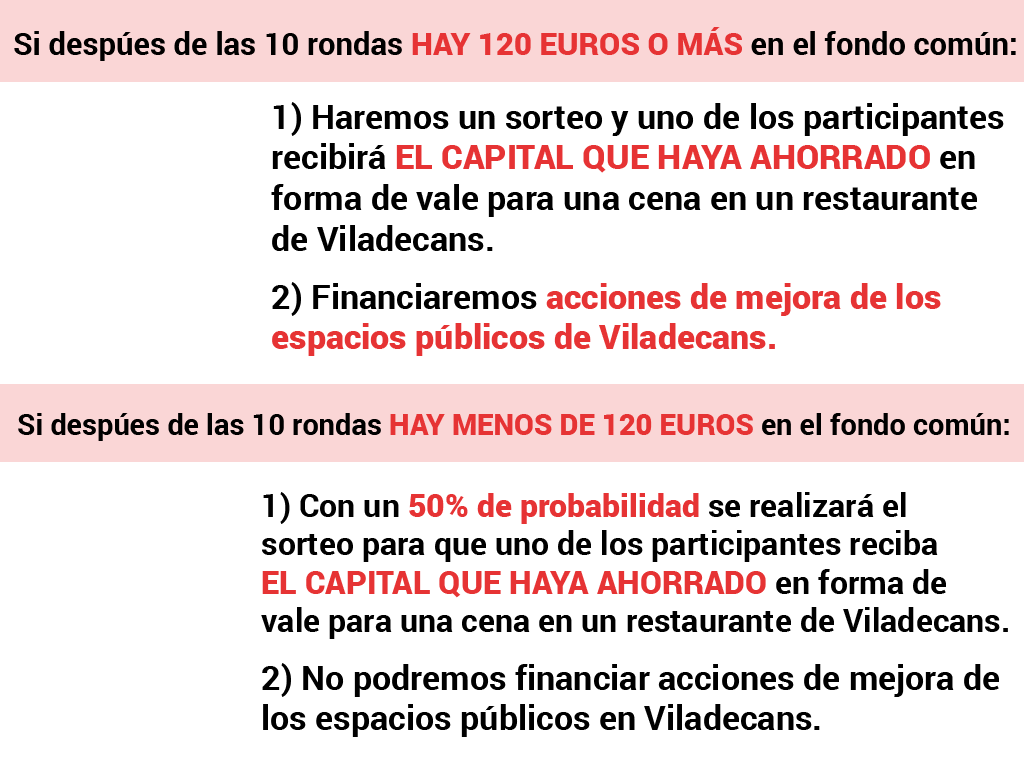
<style>
.page{position:relative;width:1024px;height:768px;background:#ffffff}
.page>*{position:absolute;margin:0}
.t1{font:31px "Roboto-Bold";color:#000000}
.t2{font:31px "Roboto-Black";color:#e63334}
.t3{font:34px "Roboto-Bold";color:#000000}
.t4{font:34px "Roboto-Black";color:#e63334}
.t5{font:29px "Roboto-Bold";color:#000000}
.t6{font:29px "Roboto-Black";color:#e63334}
.t7{font:32.1px "Roboto-Bold";color:#000000}
.t8{font:32.1px "Roboto-Black";color:#e63334}
</style>
<div class="page">
<p class="t1" style="left:14px;top:27px;width:1002px;height:34px">Si despúes de las 10 rondas <span class="t2">HAY 120 EUROS O MÁS </span>en el fondo común:</p>
<p class="t3" style="left:271px;top:102px;width:733px;height:254px">1) Haremos un sorteo y uno de los participantes <br>recibirá <span class="t4">EL CAPITAL QUE HAYA AHORRADO </span>en <br>forma de vale para una cena en un restaurante<br>de Viladecans.<br><br>2) Financiaremos <span class="t4">acciones de mejora de los <br>espacios públicos de Viladecans.</span></p>
<p class="t5" style="left:18px;top:413px;width:991px;height:28px">Si despúes de las 10 rondas <span class="t6">HAY MENOS DE 120 EUROS </span>en el fondo común:</p>
<p class="t3" style="left:261px;top:492px;width:747px;height:245px"><span class="t7">1) Con un </span><span class="t8">50% de probabilidad </span><span class="t7">se realizará el <br>sorteo para que uno de los participantes reciba <br></span><span class="t8">EL CAPITAL QUE HAYA AHORRADO </span><span class="t7">en forma de<br>vale para una cena en un restaurante de Viladecans.<br><br></span>2) No podremos financiar acciones de mejora de<br>los espacios públicos en Viladecans.</p>
</div>
